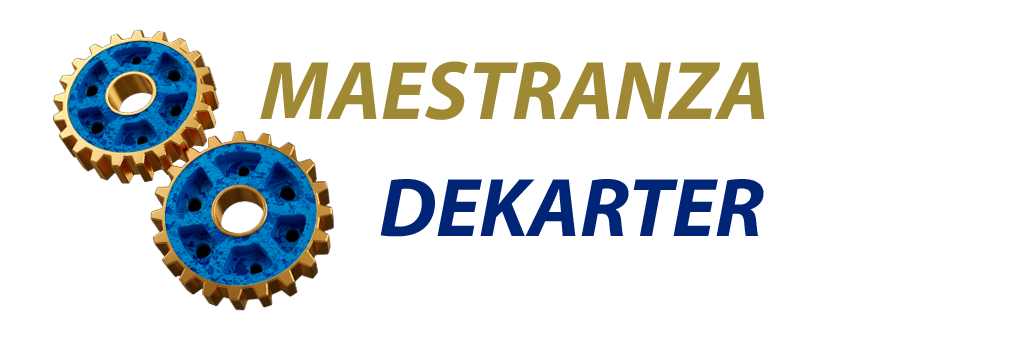
<style>
.page{position:relative;width:1024px;height:339px;background:#ffffff}
.page>*{position:absolute;margin:0}
.t1{font:84px "MyriadConceptItalic-BoldItalic";color:#9f8935}
.t2{font:84px "MyriadConceptItalic-BoldItalic";color:#002476}
</style>
<div class="page">
<p class="t1" style="left:260px;top:61px;width:505px;height:59px">MAESTRANZA</p>
<p class="t2" style="left:380px;top:179px;width:384px;height:58px">DEKARTER</p>
</div>
